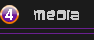
<style>
.page{position:relative;width:94px;height:40px;background:#1b1b1b}
.page>*{position:absolute;margin:0}
.t1{font:12px "Baveuse";color:#cccccc}
</style>
<div class="page">
<p class="t1" style="left:34px;top:10px;width:45px;height:10px">Media</p>
</div>
